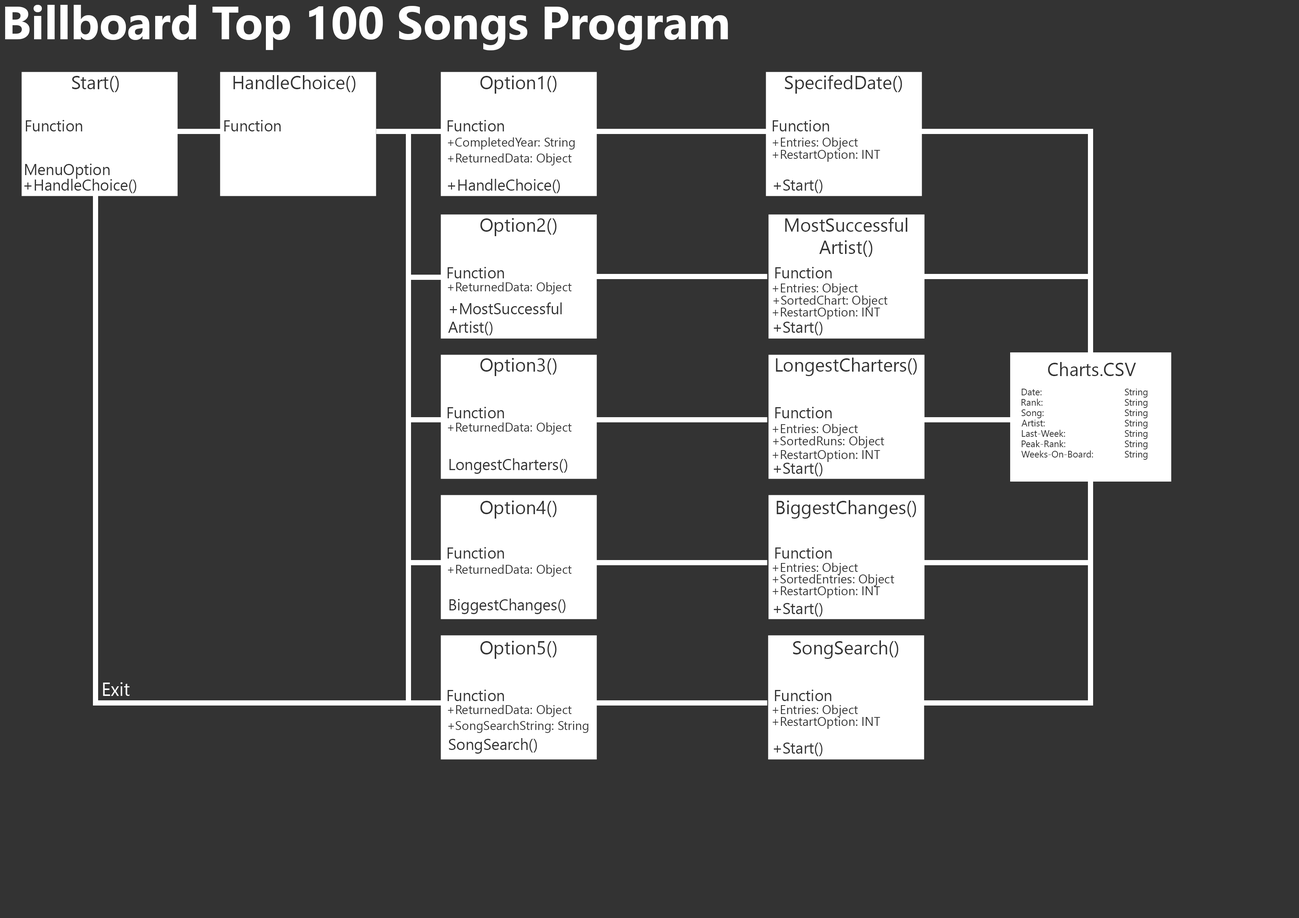
<style>
.page{position:relative;width:1299px;height:918px;background:#333333}
.page>*{position:absolute;margin:0}
.t1{font:46.3px "SegoeUI-Bold";color:#ffffff}
.t2{font:18.5px "SegoeUI";color:#333333}
.t3{font:15.4px "SegoeUI";color:#333333}
.t4{font:12.3px "SegoeUI";color:#333333}
.t5{font:9.3px "SegoeUI";color:#333333}
.t6{font:18.5px "SegoeUI";color:#ffffff}
</style>
<div class="page">
<p class="t1" style="left:5px;top:5px;width:723px;height:45px">Billboard Top 100 Songs Program</p>
<p class="t2" style="left:72px;top:76px;width:47px;height:16px">Start()</p>
<p class="t2" style="left:233px;top:75px;width:122px;height:17px">HandleChoice()</p>
<p class="t2" style="left:480px;top:76px;width:76px;height:18px">Option1()</p>
<p class="t2" style="left:784px;top:75px;width:118px;height:19px">SpecifedDate()</p>
<p class="t3" style="left:26px;top:120px;width:56px;height:11px">Function</p>
<p class="t3" style="left:224px;top:120px;width:57px;height:11px">Function</p>
<p class="t3" style="left:447px;top:120px;width:57px;height:11px">Function</p>
<p class="t3" style="left:772px;top:120px;width:57px;height:11px">Function</p>
<p class="t4" style="left:448px;top:137px;width:127px;height:13px">+CompletedYear: String</p>
<p class="t4" style="left:772px;top:137px;width:86px;height:13px">+Entries: Object</p>
<p class="t4" style="left:772px;top:150px;width:108px;height:12px">+RestartOption: INT</p>
<p class="t4" style="left:448px;top:153px;width:124px;height:12px">+ReturnedData: Object</p>
<p class="t3" style="left:25px;top:164px;width:85px;height:15px">MenuOption</p>
<p class="t3" style="left:24px;top:179px;width:112px;height:14px">+HandleChoice()</p>
<p class="t3" style="left:448px;top:179px;width:112px;height:14px">+HandleChoice()</p>
<p class="t3" style="left:773px;top:180px;width:49px;height:13px">+Start()</p>
<p class="t2" style="left:480px;top:218px;width:76px;height:18px">Option2()</p>
<p class="t2" style="left:785px;top:218px;width:122px;height:39px;text-align:center">MostSuccessful<br>Artist()</p>
<p class="t3" style="left:447px;top:267px;width:57px;height:11px">Function</p>
<p class="t3" style="left:775px;top:267px;width:57px;height:11px">Function</p>
<p class="t4" style="left:448px;top:282px;width:124px;height:12px">+ReturnedData: Object</p>
<p class="t4" style="left:772px;top:283px;width:86px;height:12px">+Entries: Object</p>
<p class="t3" style="left:448px;top:302px;width:114px;height:33px">+MostSuccessful<br>Artist()</p>
<p class="t4" style="left:773px;top:295px;width:114px;height:13px">+SortedChart: Object</p>
<p class="t4" style="left:772px;top:308px;width:108px;height:12px">+RestartOption: INT</p>
<p class="t3" style="left:773px;top:322px;width:49px;height:13px">+Start()</p>
<p class="t2" style="left:480px;top:358px;width:76px;height:18px">Option3()</p>
<p class="t2" style="left:776px;top:358px;width:141px;height:18px">LongestCharters()</p>
<p class="t2" style="left:1048px;top:362px;width:88px;height:14px">Charts.CSV</p>
<p class="t5" style="left:1021px;top:389px;width:20px;height:6px">Date:</p>
<p class="t5" style="left:1124px;top:389px;width:23px;height:9px">String</p>
<p class="t5" style="left:1021px;top:399px;width:22px;height:7px">Rank:</p>
<p class="t5" style="left:1124px;top:399px;width:23px;height:9px">String</p>
<p class="t3" style="left:447px;top:407px;width:57px;height:11px">Function</p>
<p class="t3" style="left:775px;top:407px;width:57px;height:11px">Function</p>
<p class="t5" style="left:1021px;top:409px;width:23px;height:9px">Song:</p>
<p class="t5" style="left:1124px;top:409px;width:23px;height:9px">String</p>
<p class="t4" style="left:448px;top:422px;width:124px;height:13px">+ReturnedData: Object</p>
<p class="t4" style="left:772px;top:424px;width:86px;height:12px">+Entries: Object</p>
<p class="t5" style="left:1021px;top:420px;width:24px;height:6px">Artist:</p>
<p class="t5" style="left:1124px;top:420px;width:23px;height:9px">String</p>
<p class="t4" style="left:773px;top:436px;width:111px;height:12px">+SortedRuns: Object</p>
<p class="t5" style="left:1021px;top:430px;width:44px;height:7px">Last-Week:</p>
<p class="t5" style="left:1124px;top:430px;width:23px;height:9px">String</p>
<p class="t5" style="left:1021px;top:440px;width:44px;height:7px">Peak-Rank:</p>
<p class="t5" style="left:1124px;top:441px;width:23px;height:8px">String</p>
<p class="t3" style="left:449px;top:458px;width:118px;height:16px">LongestCharters()</p>
<p class="t4" style="left:772px;top:450px;width:108px;height:12px">+RestartOption: INT</p>
<p class="t5" style="left:1021px;top:451px;width:72px;height:7px">Weeks-On-Board:</p>
<p class="t5" style="left:1124px;top:451px;width:23px;height:9px">String</p>
<p class="t3" style="left:773px;top:463px;width:49px;height:13px">+Start()</p>
<p class="t2" style="left:480px;top:501px;width:76px;height:18px">Option4()</p>
<p class="t2" style="left:776px;top:500px;width:140px;height:19px">BiggestChanges()</p>
<p class="t3" style="left:447px;top:547px;width:57px;height:12px">Function</p>
<p class="t3" style="left:775px;top:547px;width:57px;height:12px">Function</p>
<p class="t4" style="left:448px;top:565px;width:124px;height:12px">+ReturnedData: Object</p>
<p class="t4" style="left:772px;top:563px;width:86px;height:12px">+Entries: Object</p>
<p class="t4" style="left:772px;top:574px;width:122px;height:12px">+SortedEntries: Object</p>
<p class="t4" style="left:772px;top:586px;width:108px;height:12px">+RestartOption: INT</p>
<p class="t3" style="left:449px;top:599px;width:116px;height:15px">BiggestChanges()</p>
<p class="t3" style="left:773px;top:603px;width:49px;height:14px">+Start()</p>
<p class="t2" style="left:480px;top:641px;width:76px;height:18px">Option5()</p>
<p class="t2" style="left:793px;top:640px;width:105px;height:19px">SongSearch()</p>
<p class="t6" style="left:103px;top:682px;width:27px;height:14px">Exit</p>
<p class="t3" style="left:447px;top:690px;width:57px;height:11px">Function</p>
<p class="t3" style="left:775px;top:690px;width:56px;height:11px">Function</p>
<p class="t4" style="left:448px;top:705px;width:124px;height:12px">+ReturnedData: Object</p>
<p class="t4" style="left:772px;top:705px;width:86px;height:12px">+Entries: Object</p>
<p class="t4" style="left:448px;top:721px;width:140px;height:12px">+SongSearchString: String</p>
<p class="t4" style="left:772px;top:717px;width:108px;height:12px">+RestartOption: INT</p>
<p class="t3" style="left:449px;top:738px;width:88px;height:16px">SongSearch()</p>
<p class="t3" style="left:773px;top:743px;width:49px;height:13px">+Start()</p>
</div>
